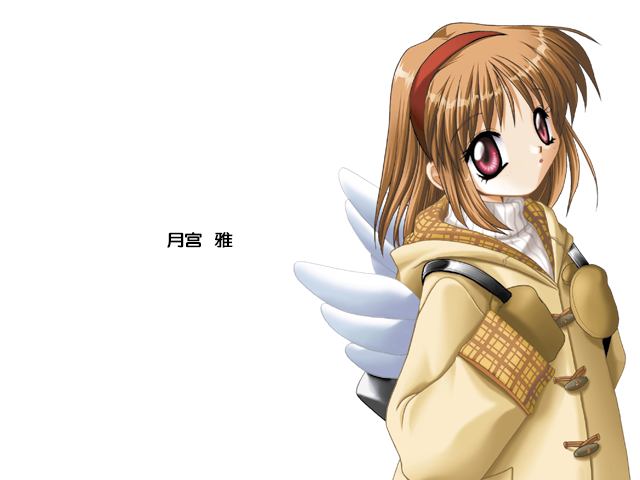
<style>
.page{position:relative;width:640px;height:480px;background:#ffffff}
.page>*{position:absolute;margin:0}
.t1{font:17px "FZY4K--GBK1-0";letter-spacing:-0.08em;color:#000000;scale:1.14 1}
</style>
<div class="page">
<p class="t1" style="left:167px;top:232px;width:66px;height:16px">月宫   雅</p>
</div>
